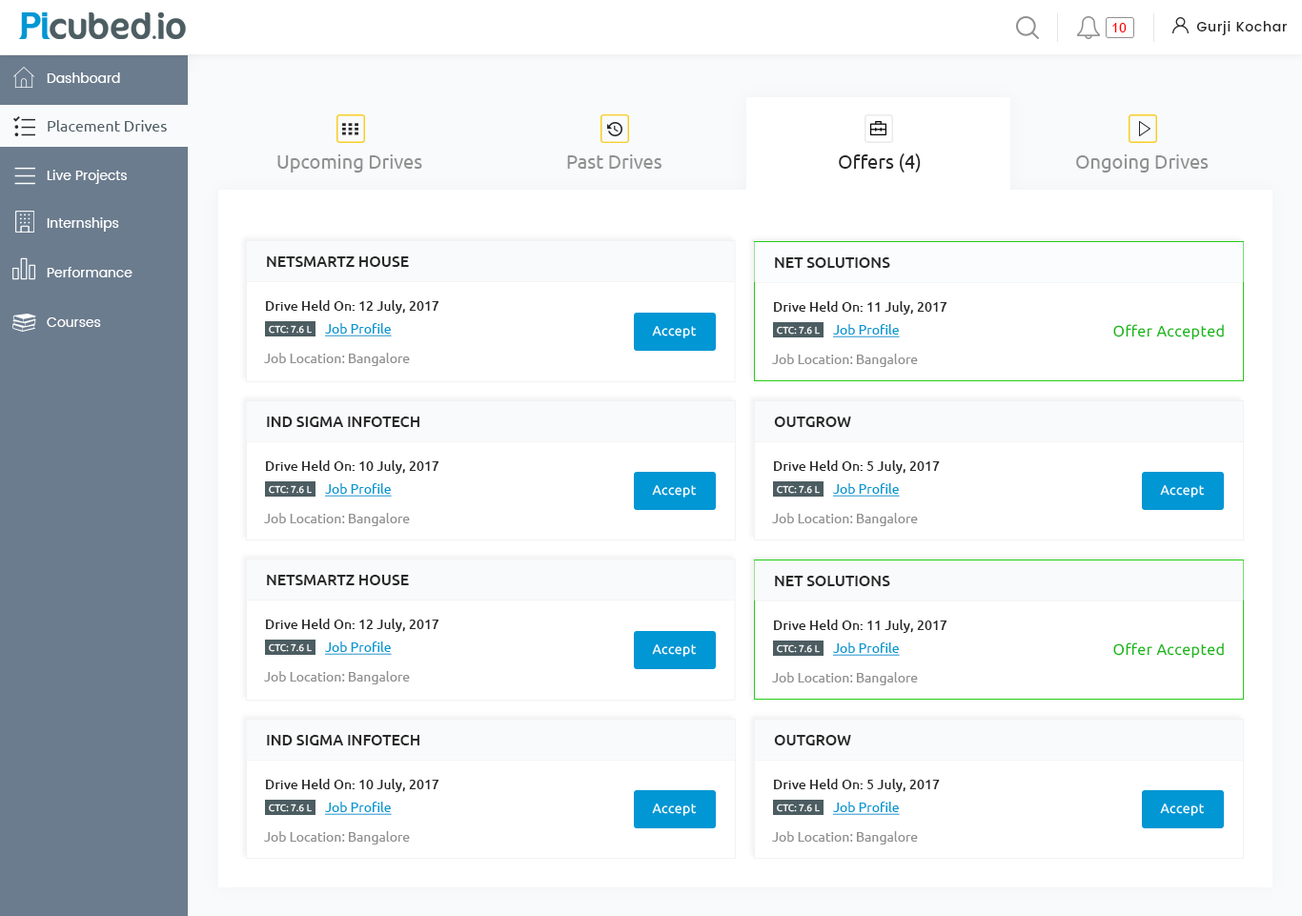
<style>
.page{position:relative;width:1302px;height:916px;background:#ffffff}
.page>*{position:absolute;margin:0}
.t1{font:19.1px "Ubuntu";color:#909090}
.t2{font:19.1px "Ubuntu";color:#282828}
.t3{font:15.2px "Ubuntu-Medium";color:#282828;text-transform:uppercase}
.t4{font:13.3px "Ubuntu-Medium";color:#282828}
.t5{font:9.5px "Ubuntu";color:#ffffff}
.t6{font:13.3px "Ubuntu";color:#0099d2;text-decoration:underline}
.t7{font:15.2px "Ubuntu";letter-spacing:0.03em;color:#13b813}
.t8{font:13.3px "Ubuntu";color:#909090}
</style>
<div class="page">
<p class="t1" style="left:277px;top:154px;width:145px;height:19px">Upcoming Drives</p>
<p class="t1" style="left:567px;top:154px;width:94px;height:15px">Past Drives</p>
<p class="t2" style="left:839px;top:153px;width:82px;height:20px">Offers (4)</p>
<p class="t1" style="left:1076px;top:154px;width:133px;height:19px">Ongoing Drives</p>
<p class="t3" style="left:267px;top:256px;width:142px;height:11px">Netsmartz House</p>
<p class="t3" style="left:775px;top:257px;width:115px;height:11px">Net Solutions</p>
<p class="t4" style="left:266px;top:300px;width:173px;height:14px">Drive Held On: 12 July, 2017</p>
<p class="t4" style="left:774px;top:301px;width:173px;height:14px">Drive Held On: 11 July, 2017</p>
<p class="t5" style="left:269px;top:325px;width:43px;height:9px">CTC: 7.6 L</p>
<p class="t6" style="left:325px;top:323px;width:67px;height:13px">Job Profile</p>
<p class="t5" style="left:777px;top:326px;width:43px;height:9px">CTC: 7.6 L</p>
<p class="t6" style="left:833px;top:324px;width:67px;height:13px">Job Profile</p>
<p class="t7" style="left:1113px;top:324px;width:111px;height:16px">Offer Accepted</p>
<p class="t8" style="left:264px;top:353px;width:146px;height:13px">Job Location: Bangalore</p>
<p class="t8" style="left:772px;top:354px;width:146px;height:13px">Job Location: Bangalore</p>
<p class="t3" style="left:267px;top:416px;width:152px;height:11px">IND Sigma Infotech</p>
<p class="t3" style="left:774px;top:416px;width:77px;height:11px">Outgrow</p>
<p class="t4" style="left:266px;top:460px;width:173px;height:14px">Drive Held On: 10 July, 2017</p>
<p class="t4" style="left:774px;top:460px;width:166px;height:14px">Drive Held On: 5 July, 2017</p>
<p class="t5" style="left:269px;top:485px;width:43px;height:9px">CTC: 7.6 L</p>
<p class="t6" style="left:325px;top:483px;width:67px;height:14px">Job Profile</p>
<p class="t5" style="left:777px;top:485px;width:43px;height:9px">CTC: 7.6 L</p>
<p class="t6" style="left:833px;top:483px;width:67px;height:14px">Job Profile</p>
<p class="t8" style="left:264px;top:513px;width:146px;height:13px">Job Location: Bangalore</p>
<p class="t8" style="left:772px;top:513px;width:146px;height:13px">Job Location: Bangalore</p>
<p class="t3" style="left:267px;top:575px;width:142px;height:10px">Netsmartz House</p>
<p class="t3" style="left:775px;top:576px;width:115px;height:10px">Net Solutions</p>
<p class="t4" style="left:266px;top:619px;width:173px;height:13px">Drive Held On: 12 July, 2017</p>
<p class="t4" style="left:774px;top:620px;width:173px;height:13px">Drive Held On: 11 July, 2017</p>
<p class="t6" style="left:325px;top:641px;width:67px;height:14px">Job Profile</p>
<p class="t5" style="left:269px;top:643px;width:43px;height:9px">CTC: 7.6 L</p>
<p class="t5" style="left:777px;top:644px;width:43px;height:9px">CTC: 7.6 L</p>
<p class="t6" style="left:833px;top:642px;width:67px;height:14px">Job Profile</p>
<p class="t7" style="left:1113px;top:642px;width:111px;height:17px">Offer Accepted</p>
<p class="t8" style="left:264px;top:671px;width:146px;height:13px">Job Location: Bangalore</p>
<p class="t8" style="left:772px;top:672px;width:146px;height:13px">Job Location: Bangalore</p>
<p class="t3" style="left:267px;top:735px;width:152px;height:10px">IND Sigma Infotech</p>
<p class="t3" style="left:774px;top:735px;width:77px;height:10px">Outgrow</p>
<p class="t4" style="left:266px;top:779px;width:173px;height:13px">Drive Held On: 10 July, 2017</p>
<p class="t4" style="left:774px;top:779px;width:166px;height:13px">Drive Held On: 5 July, 2017</p>
<p class="t5" style="left:269px;top:803px;width:43px;height:9px">CTC: 7.6 L</p>
<p class="t6" style="left:325px;top:802px;width:67px;height:13px">Job Profile</p>
<p class="t5" style="left:777px;top:803px;width:43px;height:9px">CTC: 7.6 L</p>
<p class="t6" style="left:833px;top:802px;width:67px;height:13px">Job Profile</p>
<p class="t8" style="left:264px;top:831px;width:146px;height:13px">Job Location: Bangalore</p>
<p class="t8" style="left:772px;top:831px;width:146px;height:13px">Job Location: Bangalore</p>
</div>
